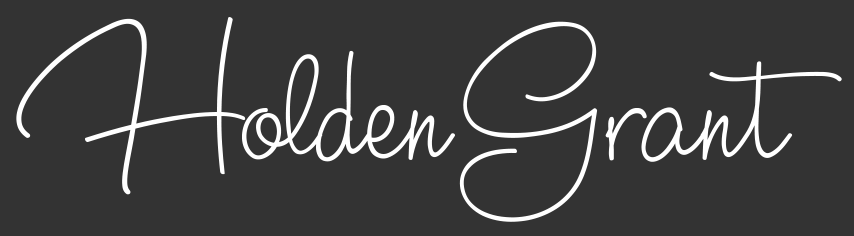
<style>
.page{position:relative;width:854px;height:236px;background:#333333}
.page>*{position:absolute;margin:0}
.t1{font:200px "CrunchyPERSONALUSEONLY";color:#ffffff}
</style>
<div class="page">
<p class="t1" style="left:16px;top:17px;width:826px;height:205px">HoldenGrant</p>
</div>
